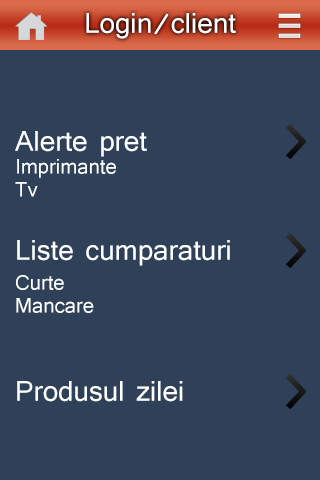
<style>
.page{position:relative;width:320px;height:480px;background:#2f4158}
.page>*{position:absolute;margin:0}
.t1{font:30px "Shruti";color:#ffffff}
.t2{font:22px "Shruti";color:#ffffff}
</style>
<div class="page">
<p class="t1" style="left:86px;top:13px;width:150px;height:26px">Login/client</p>
<p class="t1" style="left:15px;top:131px;width:132px;height:26px">Alerte pret</p>
<p class="t2" style="left:17px;top:159px;width:99px;height:19px">Imprimante</p>
<p class="t2" style="left:15px;top:182px;width:23px;height:15px">Tv</p>
<p class="t1" style="left:17px;top:240px;width:213px;height:26px">Liste cumparaturi</p>
<p class="t2" style="left:16px;top:275px;width:48px;height:15px">Curte</p>
<p class="t2" style="left:16px;top:298px;width:78px;height:15px">Mancare</p>
<p class="t1" style="left:17px;top:381px;width:166px;height:21px">Produsul zilei</p>
</div>
